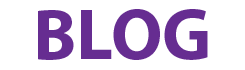
<style>
.page{position:relative;width:245px;height:70px;background:#ffffff}
.page>*{position:absolute;margin:0}
.t1{font:72px "MyriadPro-Bold";color:#662d91}
</style>
<div class="page">
<p class="t1" style="left:38px;top:9px;width:170px;height:51px">BLOG</p>
</div>
